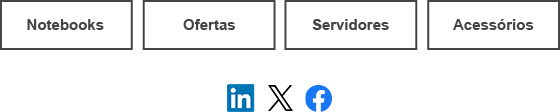
<style>
.page{position:relative;width:560px;height:112px;background:#ffffff}
.page>*{position:absolute;margin:0}
.t1{font:15px "Arial-BoldMT";color:#444444}
</style>
<div class="page">
<p class="t1" style="left:27px;top:19px;width:77px;height:11px">Notebooks</p>
<p class="t1" style="left:183px;top:19px;width:52px;height:11px">Ofertas</p>
<p class="t1" style="left:312px;top:19px;width:77px;height:11px">Servidores</p>
<p class="t1" style="left:453px;top:19px;width:81px;height:11px">Acessórios</p>
</div>
